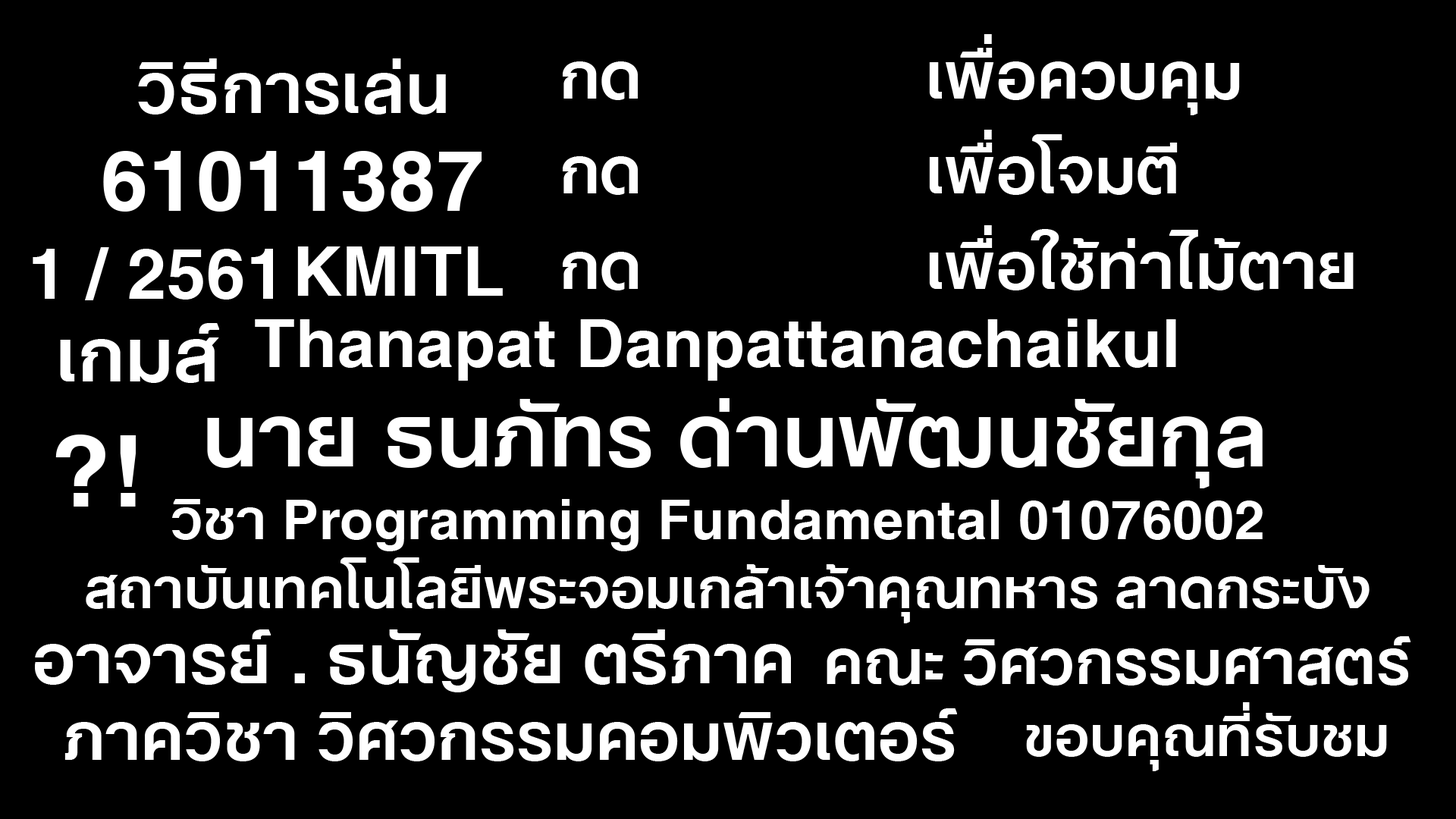
<style>
.page{position:relative;width:1456px;height:819px;background:#000000}
.page>*{position:absolute;margin:0}
.t1{font:63.5px/95.3px "HelveticaLTThai-Bold";letter-spacing:0.01em;color:#ffffff}
.t2{font:68.2px "HelveticaLTThai-Bold";letter-spacing:0.01em;color:#ffffff}
.t3{font:84.8px "HelveticaLTThai-Bold";letter-spacing:0.01em;color:#ffffff}
.t4{font:70.2px "HelveticaLTThai-Bold";letter-spacing:0.01em;color:#ffffff}
.t5{font:68.8px "HelveticaLTThai-Bold";letter-spacing:0.01em;color:#ffffff}
.t6{font:73.3px "HelveticaLTThai-Bold";letter-spacing:0.01em;color:#ffffff}
.t7{font:66.9px "HelveticaLTThai-Bold";letter-spacing:0.01em;color:#ffffff}
.t8{font:85.2px "HelveticaLTThai-Bold";letter-spacing:0.01em;color:#ffffff}
.t9{font:99.3px "HelveticaLTThai-Bold";letter-spacing:0.01em;color:#ffffff}
.t10{font:54.6px "HelveticaLTThai-Bold";letter-spacing:0.01em;color:#ffffff}
.t11{font:67.4px "HelveticaLTThai-Bold";letter-spacing:0.01em;color:#ffffff}
.t12{font:60.5px "HelveticaLTThai-Bold";letter-spacing:0.01em;color:#ffffff}
.t13{font:64.9px "HelveticaLTThai-Bold";letter-spacing:0.01em;color:#ffffff}
</style>
<div class="page">
<p class="t1" style="left:563px;top:34px;width:791px;height:256px">กด                เพื่อควบคุม<br>กด                เพื่อโจมตี<br>กด                เพื่อใช้ท่าไม้ตาย</p>
<p class="t2" style="left:138px;top:58px;width:308px;height:57px">วิธีการเล่น</p>
<p class="t3" style="left:103px;top:151px;width:379px;height:61px">61011387</p>
<p class="t4" style="left:33px;top:247px;width:240px;height:53px">1 / 2561</p>
<p class="t5" style="left:297px;top:246px;width:206px;height:50px">KMITL</p>
<p class="t6" style="left:60px;top:323px;width:159px;height:60px">เกมส์</p>
<p class="t7" style="left:255px;top:318px;width:921px;height:63px">Thanapat Danpattanachaikul</p>
<p class="t8" style="left:207px;top:398px;width:1056px;height:90px">นาย ธนภัทร ด่านพัฒนชัยกุล</p>
<p class="t9" style="left:55px;top:435px;width:81px;height:72px">?!</p>
<p class="t10" style="left:172px;top:499px;width:1091px;height:52px">วิชา Programming Fundamental 01076002</p>
<p class="t10" style="left:86px;top:557px;width:1284px;height:66px">สถาบันเทคโนโลยีพระจอมเกล้าเจ้าคุณทหาร ลาดกระบัง</p>
<p class="t11" style="left:35px;top:629px;width:756px;height:63px">อาจารย์ . ธนัญชัย ตรีภาค</p>
<p class="t12" style="left:827px;top:636px;width:583px;height:50px">คณะ วิศวกรรมศาสตร์</p>
<p class="t13" style="left:64px;top:708px;width:893px;height:53px">ภาควิชา วิศวกรรมคอมพิวเตอร์</p>
<p class="t10" style="left:1026px;top:702px;width:361px;height:69px">ขอบคุณที่รับชม</p>
</div>
